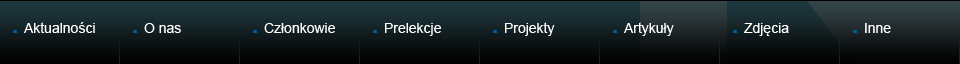
<style>
.page{position:relative;width:960px;height:64px}
.page>*{position:absolute;margin:0}
.t1{font:14px "ArialMT";color:#ffffff}
.t2{font:36px "ArialMT";color:#0060a0}
</style>
<div class="page">
<p class="t1" style="left:13px;top:22px;width:82px;height:11px"><span class="t2">.</span> Aktualności</p>
<p class="t1" style="left:133px;top:23px;width:48px;height:10px"><span class="t2">.</span> O nas</p>
<p class="t1" style="left:253px;top:23px;width:82px;height:10px"><span class="t2">.</span> Członkowie</p>
<p class="t1" style="left:373px;top:23px;width:68px;height:13px"><span class="t2">.</span> Prelekcje</p>
<p class="t1" style="left:493px;top:22px;width:62px;height:14px"><span class="t2">.</span> Projekty</p>
<p class="t1" style="left:613px;top:22px;width:61px;height:14px"><span class="t2">.</span> Artykuły</p>
<p class="t1" style="left:733px;top:23px;width:56px;height:13px"><span class="t2">.</span> Zdjęcia</p>
<p class="t1" style="left:853px;top:23px;width:38px;height:10px"><span class="t2">.</span> Inne</p>
</div>
